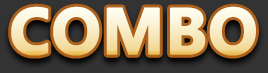
<style>
.page{position:relative;width:268px;height:73px;background:#333333}
.page>*{position:absolute;margin:0}
.t1{font:60px "MicrosoftYaHei-Bold";font-weight:bold}
</style>
<div class="page">
<p class="t1" style="left:11px;top:6px;width:245px;height:50px">COMBO</p>
</div>
